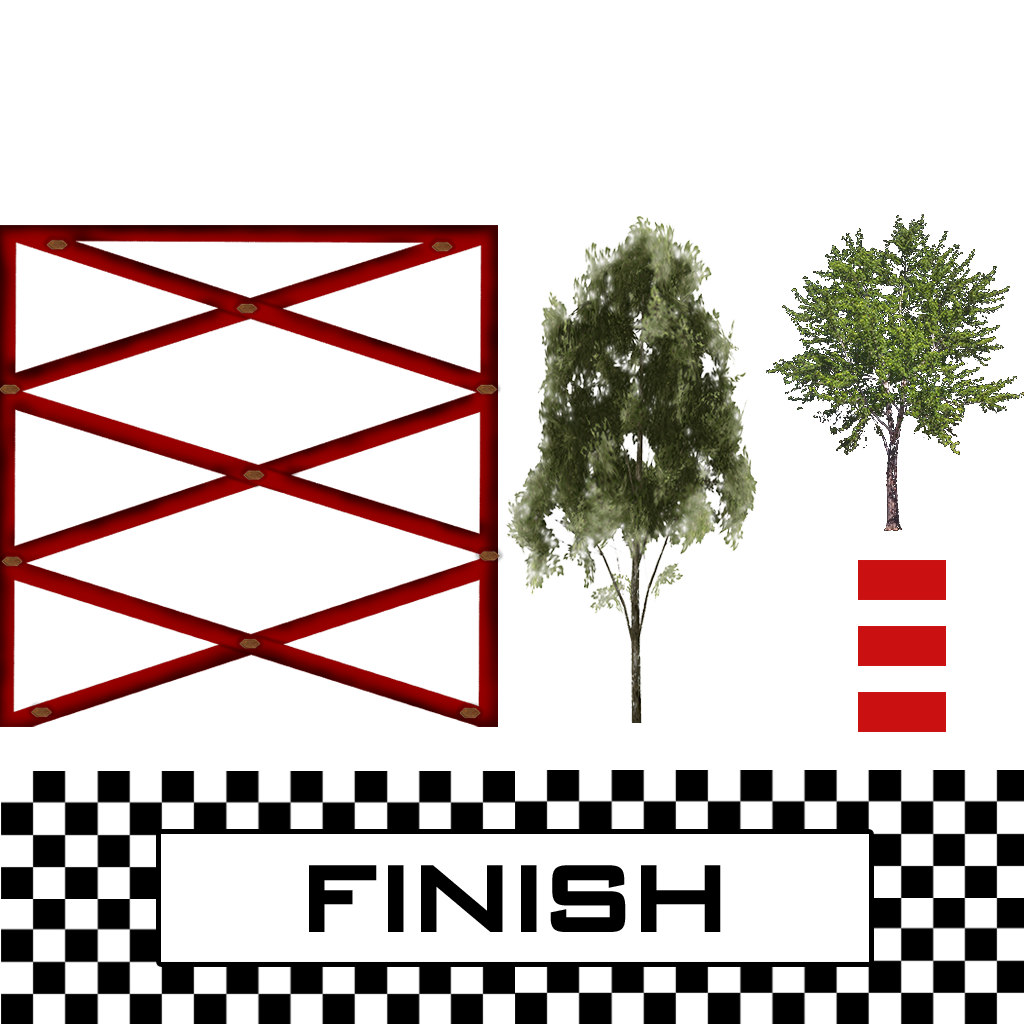
<style>
.page{position:relative;width:1024px;height:1024px;background:#ffffff}
.page>*{position:absolute;margin:0}
.t1{font:100px "UTMBanqueBold";color:#000000}
</style>
<div class="page">
<p class="t1" style="left:309px;top:865px;width:412px;height:67px">FINISH</p>
</div>
